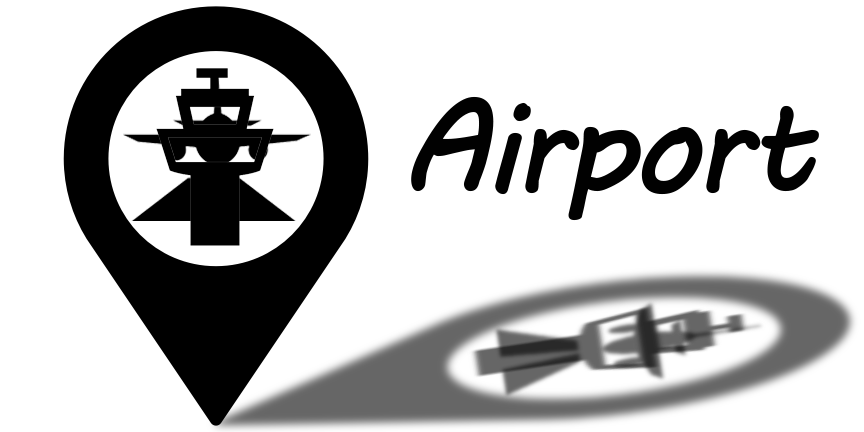
<style>
.page{position:relative;width:864px;height:432px;background:#ffffff}
.page>*{position:absolute;margin:0}
.t1{font:130px "MVBoli";letter-spacing:-0.05em;color:#010101;font-weight:bold}
</style>
<div class="page">
<p class="t1" style="left:411px;top:96px;width:408px;height:125px">Airport</p>
</div>
